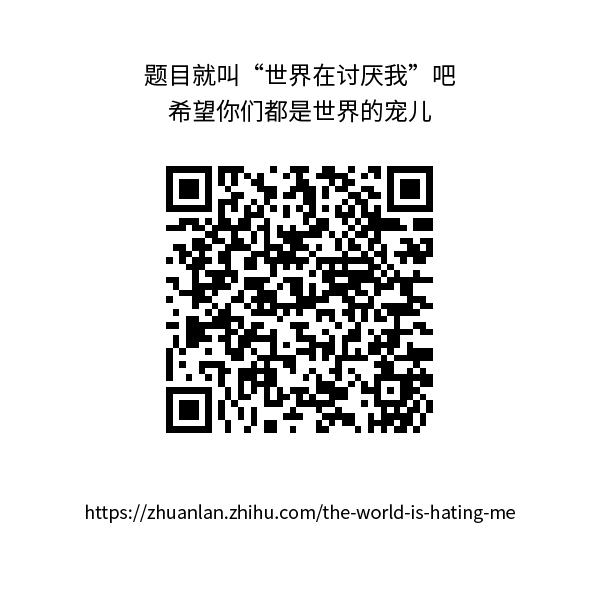
<style>
.page{position:relative;width:600px;height:600px;background:#ffffff}
.page>*{position:absolute;margin:0}
.t1{font:24px/24px "SourceHanSansSC-Normal";color:#000000}
.t2{font:18px "SourceHanSansSC-Normal";color:#000000}
</style>
<div class="page">
<p class="t1" style="left:144px;top:63px;width:311px;height:60px;text-align:center">题目就叫“世界在讨厌我”吧<br>希望你们都是世界的宠儿</p>
<p class="t2" style="left:86px;top:504px;width:429px;height:19px">https://zhuanlan.zhihu.com/the-world-is-hating-me</p>
</div>
